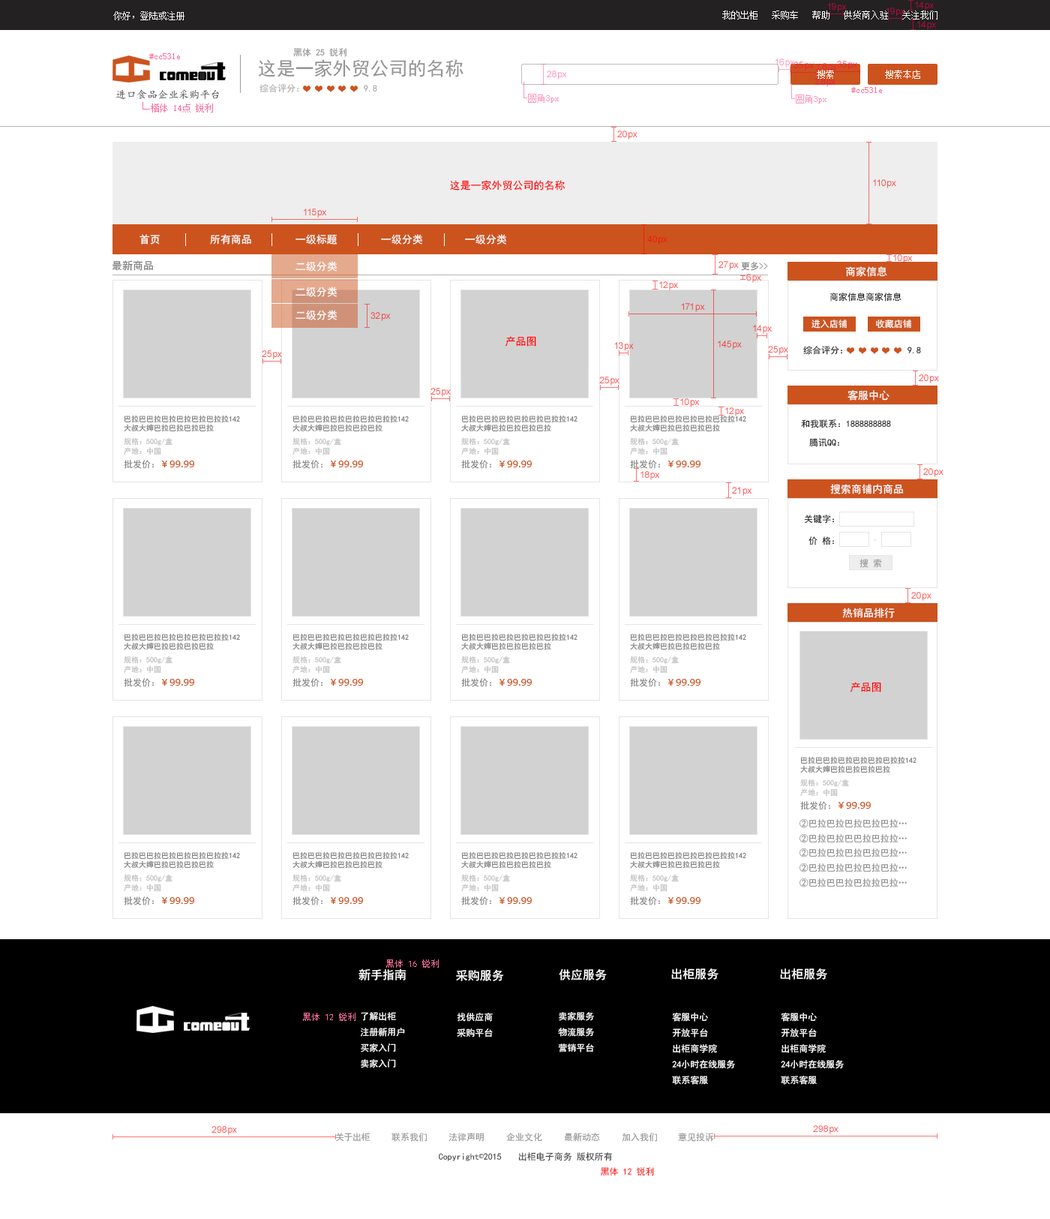
<style>
.page{position:relative;width:1050px;height:1219px;background:#ffffff}
.page>*{position:absolute;margin:0}
.t1{font:9px "SimSun";color:#ffffff}
.t2{font:9px "SimSun";color:#fc6f9a}
.t3{font:9px "SimHei";color:#959495}
.t4{font:18.7px "SimHei";color:#959495}
.t5{font:10.5px "¿¬Ìå";color:#464343}
.t6{font:9px "SimHei";color:#aeaeae}
.t7{font:9px "SimHei";color:#a7a7a7}
.t8{font:10.5px "SimHei";color:#ff0000}
.t9{font:10.5px "SimHei";color:#ffffff}
.t10{font:10.5px "SimHei";color:#7b7b7b}
.t11{font:9px "SimHei";color:#7b7b7b}
.t12{font:9px "SimHei";color:#101010}
.t13{font:9px "SimHei";color:#ffffff}
.t14{font:7.5px "SimHei";color:#7b7b7b}
.t15{font:7.5px "SimHei";color:#c0c0c0}
.t16{font:9px "MicrosoftYaHei";color:#cc531e;scale:1.08 1}
.t17{font:9px "SimHei";color:#e5e5e5}
.t18{font:9px "SimHei";color:#9a9a9a}
.t19{font:9px "SimHei";color:#8b8a8a}
.t20{font:9px "SimHei";color:#fc6f9a}
.t21{font:12px "SimHei";color:#ffffff}
.t22{font:9px "SimHei";color:#959595}
.t23{font:9px "SimHei";color:#434343}
.t24{font:9px "SimSun";color:#434343}
.t25{font:9px "SimHei";color:#ff2222}
</style>
<div class="page">
<p class="t1" style="left:113px;top:11px;width:71px;height:9px">你好，登陆或注册</p>
<p class="t1" style="left:722px;top:10px;width:216px;height:10px">我的出柜   采购车   帮助   供货商入驻   关注我们</p>
<p class="t2" style="left:149px;top:53px;width:31px;height:6px">#cc531e</p>
<p class="t3" style="left:293px;top:48px;width:53px;height:9px">黑体 25 锐利</p>
<p class="t4" style="left:258px;top:59px;width:206px;height:18px">这是一家外贸公司的名称</p>
<p class="t1" style="left:817px;top:70px;width:17px;height:9px">搜索</p>
<p class="t1" style="left:885px;top:70px;width:35px;height:9px">搜索本店</p>
<p class="t5" style="left:116px;top:89px;width:103px;height:11px">进口食品企业采购平台</p>
<p class="t6" style="left:260px;top:84px;width:38px;height:9px">综合评分：</p>
<p class="t7" style="left:364px;top:85px;width:13px;height:7px">9.8</p>
<p class="t2" style="left:851px;top:87px;width:31px;height:6px">#cc531e</p>
<p class="t8" style="left:450px;top:180px;width:116px;height:10px">这是一家外贸公司的名称</p>
<p class="t9" style="left:140px;top:234px;width:20px;height:10px">首页</p>
<p class="t9" style="left:210px;top:234px;width:41px;height:10px">所有商品</p>
<p class="t9" style="left:296px;top:234px;width:42px;height:10px">一级标题</p>
<p class="t9" style="left:381px;top:234px;width:42px;height:10px">一级分类</p>
<p class="t9" style="left:465px;top:234px;width:42px;height:10px">一级分类</p>
<p class="t10" style="left:112px;top:260px;width:41px;height:11px">最新商品</p>
<p class="t9" style="left:296px;top:261px;width:42px;height:11px">二级分类</p>
<p class="t11" style="left:741px;top:262px;width:27px;height:9px">更多&gt;&gt;</p>
<p class="t9" style="left:845px;top:266px;width:42px;height:11px">商家信息</p>
<p class="t9" style="left:296px;top:286px;width:42px;height:11px">二级分类</p>
<p class="t12" style="left:830px;top:292px;width:72px;height:10px">商家信息商家信息</p>
<p class="t9" style="left:296px;top:310px;width:42px;height:10px">二级分类</p>
<p class="t13" style="left:812px;top:320px;width:36px;height:8px">进入店铺</p>
<p class="t13" style="left:876px;top:320px;width:36px;height:8px">收藏店铺</p>
<p class="t8" style="left:505px;top:336px;width:31px;height:10px">产品图</p>
<p class="t12" style="left:803px;top:346px;width:39px;height:9px">综合评分：</p>
<p class="t12" style="left:908px;top:346px;width:13px;height:7px">9.8</p>
<p class="t9" style="left:848px;top:390px;width:42px;height:10px">客服中心</p>
<p class="t14" style="left:124px;top:415px;width:116px;height:17px;text-align:right">巴拉巴巴拉巴拉巴拉巴拉巴拉拉142<br>大叔大婶巴拉巴拉巴拉巴拉</p>
<p class="t14" style="left:292px;top:415px;width:117px;height:17px;text-align:right">巴拉巴巴拉巴拉巴拉巴拉巴拉拉142<br>大叔大婶巴拉巴拉巴拉巴拉</p>
<p class="t14" style="left:461px;top:415px;width:117px;height:17px;text-align:right">巴拉巴巴拉巴拉巴拉巴拉巴拉拉142<br>大叔大婶巴拉巴拉巴拉巴拉</p>
<p class="t14" style="left:630px;top:415px;width:116px;height:17px;text-align:right">巴拉巴巴拉巴拉巴拉巴拉巴拉拉142<br>大叔大婶巴拉巴拉巴拉巴拉</p>
<p class="t12" style="left:801px;top:419px;width:90px;height:9px">和我联系：1888888888</p>
<p class="t15" style="left:124px;top:437px;width:48px;height:9px">规格：500g/盒</p>
<p class="t15" style="left:292px;top:437px;width:49px;height:9px">规格：500g/盒</p>
<p class="t15" style="left:461px;top:437px;width:49px;height:9px">规格：500g/盒</p>
<p class="t15" style="left:630px;top:437px;width:49px;height:9px">规格：500g/盒</p>
<p class="t12" style="left:809px;top:438px;width:30px;height:9px">腾讯QQ：</p>
<p class="t15" style="left:124px;top:447px;width:37px;height:8px">产地：中国</p>
<p class="t15" style="left:292px;top:447px;width:38px;height:8px">产地：中国</p>
<p class="t15" style="left:461px;top:447px;width:38px;height:8px">产地：中国</p>
<p class="t15" style="left:630px;top:447px;width:38px;height:8px">产地：中国</p>
<p class="t11" style="left:124px;top:460px;width:30px;height:9px">批发价：</p>
<p class="t16" style="left:161px;top:460px;width:33px;height:7px">￥99.99</p>
<p class="t11" style="left:292px;top:460px;width:30px;height:9px">批发价：</p>
<p class="t16" style="left:330px;top:460px;width:33px;height:7px">￥99.99</p>
<p class="t11" style="left:461px;top:460px;width:30px;height:9px">批发价：</p>
<p class="t16" style="left:499px;top:460px;width:33px;height:7px">￥99.99</p>
<p class="t11" style="left:630px;top:460px;width:30px;height:9px">批发价：</p>
<p class="t16" style="left:668px;top:460px;width:32px;height:7px">￥99.99</p>
<p class="t9" style="left:830px;top:484px;width:73px;height:10px">搜索商铺内商品</p>
<p class="t12" style="left:804px;top:514px;width:30px;height:10px">关键字：</p>
<p class="t12" style="left:808px;top:536px;width:26px;height:9px">价 格：</p>
<p class="t17" style="left:873px;top:538px;width:5px;height:4px">~</p>
<p class="t18" style="left:860px;top:559px;width:22px;height:9px">搜 索</p>
<p class="t9" style="left:842px;top:608px;width:53px;height:10px">热销品排行</p>
<p class="t14" style="left:124px;top:633px;width:116px;height:17px;text-align:right">巴拉巴巴拉巴拉巴拉巴拉巴拉拉142<br>大叔大婶巴拉巴拉巴拉巴拉</p>
<p class="t14" style="left:292px;top:633px;width:117px;height:17px;text-align:right">巴拉巴巴拉巴拉巴拉巴拉巴拉拉142<br>大叔大婶巴拉巴拉巴拉巴拉</p>
<p class="t14" style="left:461px;top:633px;width:117px;height:17px;text-align:right">巴拉巴巴拉巴拉巴拉巴拉巴拉拉142<br>大叔大婶巴拉巴拉巴拉巴拉</p>
<p class="t14" style="left:630px;top:633px;width:116px;height:17px;text-align:right">巴拉巴巴拉巴拉巴拉巴拉巴拉拉142<br>大叔大婶巴拉巴拉巴拉巴拉</p>
<p class="t15" style="left:124px;top:656px;width:48px;height:8px">规格：500g/盒</p>
<p class="t15" style="left:124px;top:665px;width:37px;height:9px">产地：中国</p>
<p class="t15" style="left:292px;top:656px;width:49px;height:8px">规格：500g/盒</p>
<p class="t15" style="left:292px;top:665px;width:38px;height:9px">产地：中国</p>
<p class="t15" style="left:461px;top:656px;width:49px;height:8px">规格：500g/盒</p>
<p class="t15" style="left:461px;top:665px;width:38px;height:9px">产地：中国</p>
<p class="t15" style="left:630px;top:656px;width:49px;height:8px">规格：500g/盒</p>
<p class="t15" style="left:630px;top:665px;width:38px;height:9px">产地：中国</p>
<p class="t11" style="left:124px;top:678px;width:30px;height:9px">批发价：</p>
<p class="t11" style="left:292px;top:678px;width:30px;height:9px">批发价：</p>
<p class="t11" style="left:461px;top:678px;width:30px;height:9px">批发价：</p>
<p class="t11" style="left:630px;top:678px;width:30px;height:9px">批发价：</p>
<p class="t16" style="left:161px;top:679px;width:33px;height:7px">￥99.99</p>
<p class="t16" style="left:330px;top:679px;width:33px;height:7px">￥99.99</p>
<p class="t16" style="left:499px;top:679px;width:33px;height:7px">￥99.99</p>
<p class="t16" style="left:668px;top:679px;width:32px;height:7px">￥99.99</p>
<p class="t8" style="left:850px;top:682px;width:31px;height:10px">产品图</p>
<p class="t14" style="left:800px;top:756px;width:116px;height:17px;text-align:right">巴拉巴巴拉巴拉巴拉巴拉巴拉拉142<br>大叔大婶巴拉巴拉巴拉巴拉</p>
<p class="t15" style="left:800px;top:778px;width:49px;height:9px">规格：500g/盒</p>
<p class="t15" style="left:800px;top:788px;width:38px;height:8px">产地：中国</p>
<p class="t11" style="left:800px;top:801px;width:30px;height:9px">批发价：</p>
<p class="t16" style="left:838px;top:802px;width:33px;height:6px">￥99.99</p>
<p class="t19" style="left:800px;top:818px;width:107px;height:10px">②巴拉巴拉巴拉巴拉巴拉…</p>
<p class="t19" style="left:800px;top:833px;width:107px;height:10px">②巴拉巴拉巴巴拉巴拉拉…</p>
<p class="t14" style="left:124px;top:851px;width:116px;height:17px;text-align:right">巴拉巴巴拉巴拉巴拉巴拉巴拉拉142<br>大叔大婶巴拉巴拉巴拉巴拉</p>
<p class="t14" style="left:292px;top:851px;width:117px;height:17px;text-align:right">巴拉巴巴拉巴拉巴拉巴拉巴拉拉142<br>大叔大婶巴拉巴拉巴拉巴拉</p>
<p class="t14" style="left:461px;top:851px;width:117px;height:17px;text-align:right">巴拉巴巴拉巴拉巴拉巴拉巴拉拉142<br>大叔大婶巴拉巴拉巴拉巴拉</p>
<p class="t14" style="left:630px;top:851px;width:116px;height:17px;text-align:right">巴拉巴巴拉巴拉巴拉巴拉巴拉拉142<br>大叔大婶巴拉巴拉巴拉巴拉</p>
<p class="t19" style="left:800px;top:848px;width:107px;height:9px">②巴拉巴拉巴拉巴拉巴拉…</p>
<p class="t19" style="left:800px;top:862px;width:107px;height:10px">②巴拉巴拉巴拉巴拉巴拉…</p>
<p class="t15" style="left:124px;top:874px;width:48px;height:8px">规格：500g/盒</p>
<p class="t15" style="left:292px;top:874px;width:49px;height:8px">规格：500g/盒</p>
<p class="t15" style="left:461px;top:874px;width:49px;height:8px">规格：500g/盒</p>
<p class="t15" style="left:630px;top:874px;width:49px;height:8px">规格：500g/盒</p>
<p class="t19" style="left:800px;top:878px;width:107px;height:9px">②巴拉巴巴拉巴拉拉巴拉…</p>
<p class="t15" style="left:124px;top:884px;width:37px;height:8px">产地：中国</p>
<p class="t15" style="left:292px;top:884px;width:38px;height:8px">产地：中国</p>
<p class="t15" style="left:461px;top:884px;width:38px;height:8px">产地：中国</p>
<p class="t15" style="left:630px;top:884px;width:38px;height:8px">产地：中国</p>
<p class="t11" style="left:124px;top:896px;width:30px;height:9px">批发价：</p>
<p class="t16" style="left:161px;top:897px;width:33px;height:7px">￥99.99</p>
<p class="t11" style="left:292px;top:896px;width:30px;height:9px">批发价：</p>
<p class="t16" style="left:330px;top:897px;width:33px;height:7px">￥99.99</p>
<p class="t11" style="left:461px;top:896px;width:30px;height:9px">批发价：</p>
<p class="t16" style="left:499px;top:897px;width:33px;height:7px">￥99.99</p>
<p class="t11" style="left:630px;top:896px;width:30px;height:9px">批发价：</p>
<p class="t16" style="left:668px;top:897px;width:32px;height:7px">￥99.99</p>
<p class="t20" style="left:386px;top:959px;width:53px;height:9px">黑体 16 锐利</p>
<p class="t21" style="left:358px;top:968px;width:48px;height:12px">新手指南</p>
<p class="t21" style="left:456px;top:969px;width:47px;height:12px">采购服务</p>
<p class="t21" style="left:559px;top:968px;width:48px;height:12px">供应服务</p>
<p class="t21" style="left:671px;top:968px;width:47px;height:12px">出柜服务</p>
<p class="t21" style="left:780px;top:968px;width:47px;height:12px">出柜服务</p>
<p class="t20" style="left:303px;top:1012px;width:53px;height:9px">黑体 12 锐利</p>
<p class="t13" style="left:360px;top:1012px;width:45px;height:56px">了解出柜<br>注册新用户<br>买家入门<br>卖家入门</p>
<p class="t13" style="left:457px;top:1012px;width:36px;height:25px">找供应商<br>采购平台</p>
<p class="t13" style="left:558px;top:1012px;width:36px;height:40px">卖家服务<br>物流服务<br>营销平台</p>
<p class="t13" style="left:672px;top:1012px;width:63px;height:72px">客服中心<br>开放平台<br>出柜商学院<br>24小时在线服务<br>联系客服</p>
<p class="t13" style="left:781px;top:1012px;width:63px;height:72px">客服中心<br>开放平台<br>出柜商学院<br>24小时在线服务<br>联系客服</p>
<p class="t22" style="left:335px;top:1132px;width:35px;height:10px">关于出柜</p>
<p class="t22" style="left:392px;top:1132px;width:35px;height:10px">联系我们</p>
<p class="t22" style="left:448px;top:1132px;width:36px;height:10px">法律声明</p>
<p class="t22" style="left:506px;top:1132px;width:36px;height:10px">企业文化</p>
<p class="t22" style="left:564px;top:1132px;width:36px;height:10px">最新动态</p>
<p class="t22" style="left:622px;top:1132px;width:35px;height:10px">加入我们</p>
<p class="t22" style="left:678px;top:1132px;width:36px;height:10px">意见投诉</p>
<p class="t23" style="left:439px;top:1153px;width:63px;height:8px">Copyright<span class="t24">©</span>2015</p>
<p class="t23" style="left:518px;top:1152px;width:54px;height:9px">出柜电子商务</p>
<p class="t23" style="left:577px;top:1152px;width:35px;height:9px">版权所有</p>
<p class="t25" style="left:600px;top:1167px;width:54px;height:9px">黑体 12 锐利</p>
</div>
